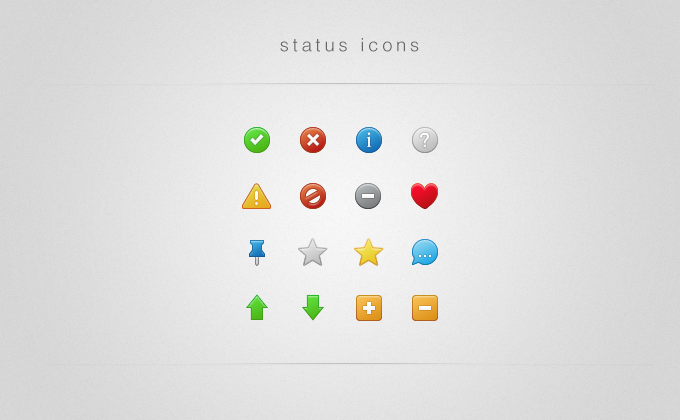
<style>
.page{position:relative;width:680px;height:420px}
.page>*{position:absolute;margin:0}
.t1{font:18.2px "Helvetica-Light";letter-spacing:0.21em;color:#656565}
.t2{font:20px "Helvetica";letter-spacing:-0.03em;color:#fbfbfb}
</style>
<div class="page">
<p class="t1" style="left:280px;top:38px;width:139px;height:14px">status icons</p>
<p class="t2" style="left:419px;top:255px;width:12px;height:2px">...</p>
</div>
